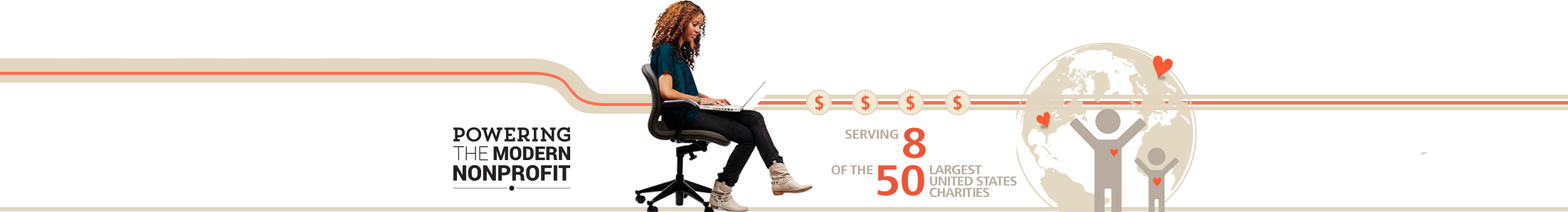
<style>
.page{position:relative;width:1568px;height:212px;background:#ffffff}
.page>*{position:absolute;margin:0}
.t1{font:12.8px "FrutigerLT-BoldCn";letter-spacing:-0.025em;color:#b7ac9d;scale:1.2 1}
.t2{font:42.8px "FrutigerLT-BoldCn";letter-spacing:-0.025em;color:#ef5439;scale:1.2 1}
.t3{font:12.8px/11.4px "FrutigerLT-BoldCn";letter-spacing:-0.05em;color:#b7ac9d;scale:1.2 1}
</style>
<div class="page">
<p class="t1" style="left:845px;top:130px;width:53px;height:10px">SERVING</p>
<p class="t2" style="left:903px;top:128px;width:23px;height:31px">8</p>
<p class="t1" style="left:831px;top:165px;width:42px;height:10px">OF THE</p>
<p class="t2" style="left:877px;top:165px;width:47px;height:31px">50</p>
<p class="t3" style="left:929px;top:165px;width:88px;height:32px">LARGEST<br>UNITED STATES<br>CHARITIES</p>
</div>
